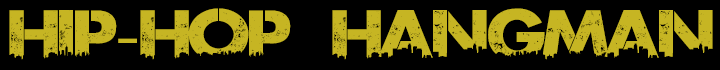
<style>
.page{position:relative;width:720px;height:70px;background:#000000}
.page>*{position:absolute;margin:0}
.t1{font:63.6px "UrbanJungleDEMO";color:#c6b523;scale:1.2 1}
.t2{font:63.6px "MyriadPro-Regular";color:#c6b523;scale:1.2 1}
</style>
<div class="page">
<p class="t1" style="left:9px;top:8px;width:704px;height:52px">HIP<span class="t2">-</span>HOP     HANGMAN</p>
</div>
